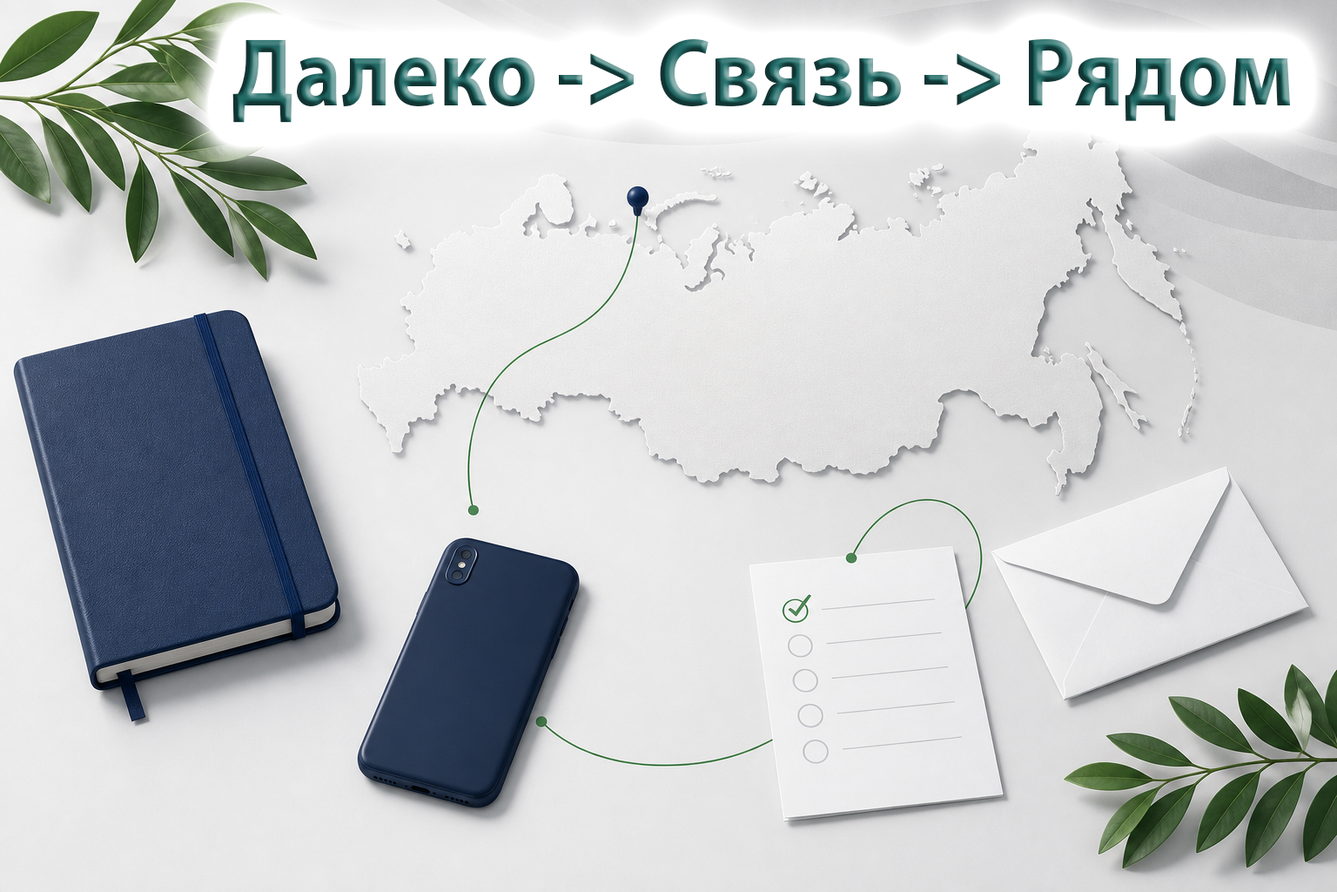
<style>
.page{position:relative;width:1337px;height:892px}
.page>*{position:absolute;margin:0}
.t1{font:97.5px "MyriadPro-Bold";scale:0.92 1}
</style>
<div class="page">
<p class="t1" style="left:232px;top:38px;width:1058px;height:85px">Далеко -&gt; Связь -&gt; Рядом</p>
</div>
